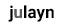
<style>
.page{position:relative;width:62px;height:26px;background:#ffffff}
.page>*{position:absolute;margin:0}
.t1{font:17px "Roboto-Bold";color:#000000}
</style>
<div class="page">
<p class="t1" style="left:8px;top:5px;width:46px;height:17px">julayn</p>
</div>
